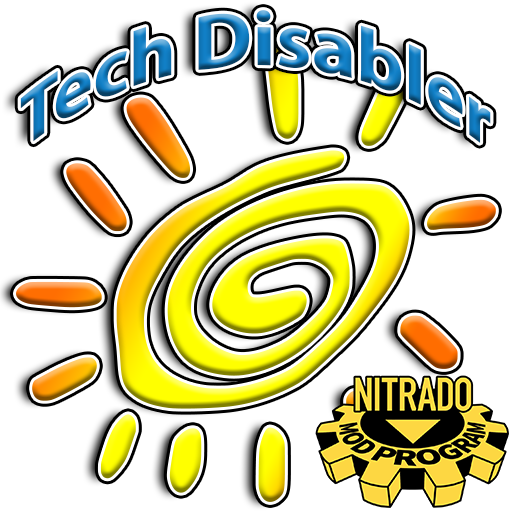
<style>
.page{position:relative;width:512px;height:512px;background:#ffffff}
.page>*{position:absolute;margin:0}
.t1{font:78px "MyriadPro-Bold"}
</style>
<div class="page">
<p class="t1" style="left:20px;top:10px;width:471px;height:133px;text-align:center">Tech Disabler</p>
</div>
